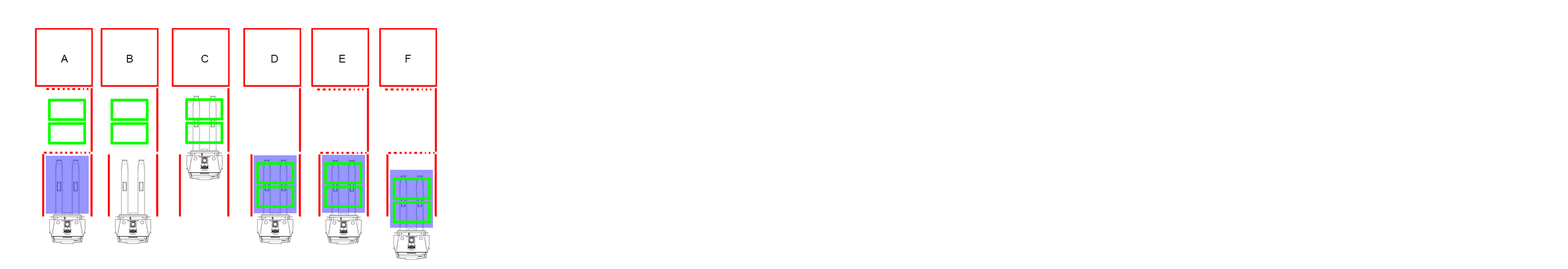
<style>
.page{position:relative;width:1568px;height:269px;background:#ffffff}
.page>*{position:absolute;margin:0}
.t1{font:10.9px "ArialMT";color:#000000}
</style>
<div class="page">
<p class="t1" style="left:61px;top:55px;width:7px;height:8px">A</p>
<p class="t1" style="left:127px;top:55px;width:6px;height:8px">B</p>
<p class="t1" style="left:201px;top:55px;width:7px;height:8px">C</p>
<p class="t1" style="left:271px;top:55px;width:7px;height:8px">D</p>
<p class="t1" style="left:339px;top:55px;width:7px;height:8px">E</p>
<p class="t1" style="left:405px;top:55px;width:6px;height:8px">F</p>
</div>
